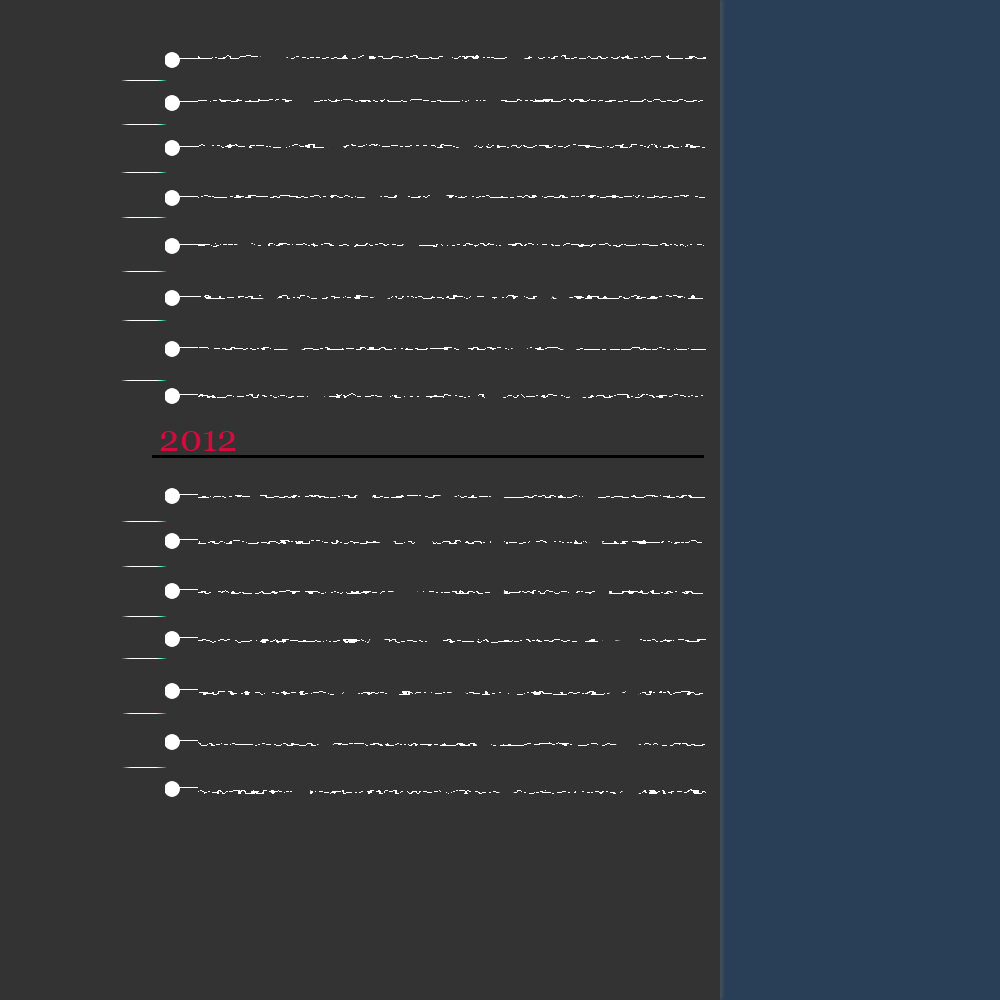
<style>
.page{position:relative;width:1000px;height:1000px;background:#333333}
.page>*{position:absolute;margin:0}
.t1{font:36px "Georgia";color:#d40b3d}
</style>
<div class="page">
<p class="t1" style="left:160px;top:431px;width:76px;height:20px">2012</p>
</div>
